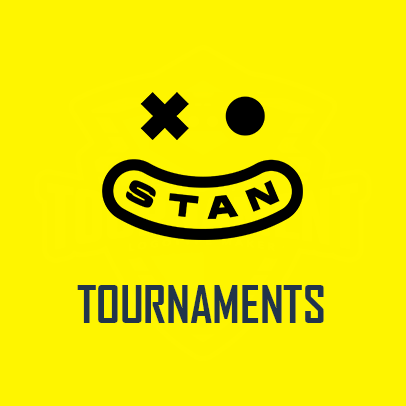
<style>
.page{position:relative;width:406px;height:406px;background:#fef500}
.page>*{position:absolute;margin:0}
.t1{font:49.7px "AgencyFB-Bold";color:#22354b}
</style>
<div class="page">
<p class="t1" style="left:77px;top:285px;width:247px;height:38px">TOURNAMENTS</p>
</div>
